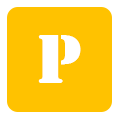
<style>
.page{position:relative;width:119px;height:119px;background:#ffc200}
.page>*{position:absolute;margin:0}
.t1{font:72px "Stencil";color:#ffffff}
</style>
<div class="page">
<p class="t1" style="left:38px;top:35px;width:43px;height:48px">P</p>
</div>
